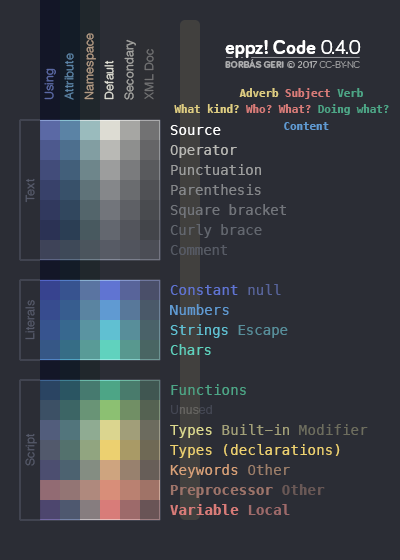
<style>
.page{position:relative;width:400px;height:560px;background:#2b2d35}
.page>*{position:absolute;margin:0}
.t1{font:11.9px "Helvetica";color:#b39c85;scale:1.05 1}
.t2{font:11.9px "Helvetica";color:#a6a6a3;scale:1.05 1}
.t3{font:20px "Bariol-Bold";letter-spacing:0.01em;color:#ffffff}
.t4{font:20px "Bariol-Regular";letter-spacing:0.01em;color:#ffffff}
.t5{font:11.9px "Helvetica";color:#5b83a5;scale:1.05 1}
.t6{font:11.9px "Helvetica";color:#727273;scale:1.05 1}
.t7{font:11.9px "Helvetica";color:#dddcd3;scale:1.05 1}
.t8{font:10px "Bariol-Bold";color:#abacae}
.t9{font:10px "Bariol-Regular";color:#abacae}
.t10{font:10px "Bariol-Light";color:#abacae}
.t11{font:11.9px "Helvetica";color:#5b69a5;scale:1.05 1}
.t12{font:10.8px "Menlo-Bold";color:#d87c79}
.t13{font:10.8px "Menlo-Bold";color:#decd82}
.t14{font:10.8px "Menlo-Bold";color:#4da586}
.t15{font:13.7px "Menlo-Regular";color:#ffffff}
.t16{font:10.8px "Menlo-Bold";color:#609ad2}
.t17{font:13.7px "Menlo-Regular";letter-spacing:-0.02em;color:#b9b9b5;scale:1.05 1}
.t18{font:13.7px "Menlo-Regular";letter-spacing:-0.02em;color:#9c9d9d;scale:1.05 1}
.t19{font:11.9px "Helvetica";color:#565a6a;scale:1.05 1}
.t20{font:13.7px "Menlo-Regular";letter-spacing:-0.02em;color:#85878a;scale:1.05 1}
.t21{font:13.7px "Menlo-Regular";letter-spacing:-0.02em;color:#72757b;scale:1.05 1}
.t22{font:13.7px "Menlo-Regular";letter-spacing:-0.02em;color:#63676f;scale:1.05 1}
.t23{font:13.7px "Menlo-Regular";letter-spacing:-0.02em;color:#575b65;scale:1.04 1}
.t24{font:13.7px "Menlo-Regular";color:#6074d2;scale:1.04 1}
.t25{font:13.7px "Menlo-Regular";color:#58649a;scale:1.04 1}
.t26{font:11.9px "Helvetica";color:#565a6a;scale:1.04 1}
.t27{font:13.7px "Menlo-Regular";color:#609ad2;scale:1.04 1}
.t28{font:13.7px "Menlo-Regular";letter-spacing:-0.02em;color:#60c0d2;scale:1.06 1}
.t29{font:13.7px "Menlo-Regular";letter-spacing:-0.02em;color:#588e9a;scale:1.06 1}
.t30{font:13.7px "Menlo-Regular";letter-spacing:-0.02em;color:#60d2be;scale:1.05 1}
.t31{font:13.7px "Menlo-Regular";color:#4da586;scale:1.04 1}
.t32{font:12px "Helvetica"}
.t33{font:13.7px "Menlo-Regular";color:#a2a079;scale:1.04 1}
.t34{font:13.7px "Menlo-Regular";color:#dcd98f;scale:1.04 1}
.t35{font:13.7px "Menlo-Regular";color:#6d6d5e;scale:1.04 1}
.t36{font:13.7px "Menlo-Regular";color:#ecd070;scale:1.04 1}
.t37{font:13.7px "Menlo-Regular";color:#d8a179;scale:1.04 1}
.t38{font:13.7px "Menlo-Regular";color:#9d7f6a;scale:1.04 1}
.t39{font:13.7px "Menlo-Bold";color:#9d746a;scale:1.04 1}
.t40{font:13.7px "Menlo-Bold";color:#695856;scale:1.04 1}
.t41{font:13.7px "Menlo-Bold";color:#d87c79;scale:1.04 1}
.t42{font:13.7px "Menlo-Bold";color:#9d6a6a;scale:1.04 1}
</style>
<div class="page">
<p class="t1" style="left:84px;top:33px;width:12px;height:67px;rotate:-90deg">Namespace</p>
<p class="t2" style="left:124px;top:39px;width:12px;height:61px;rotate:-90deg">Secondary</p>
<p class="t3" style="left:225px;top:40px;width:136px;height:18px">eppz! Code<span class="t4"> 0.4.0</span></p>
<p class="t5" style="left:64px;top:53px;width:10px;height:47px;rotate:-90deg">Attribute</p>
<p class="t6" style="left:144px;top:49px;width:10px;height:51px;rotate:-90deg">XML Doc</p>
<p class="t7" style="left:104px;top:60px;width:10px;height:40px;rotate:-90deg">Default</p>
<p class="t8" style="left:225px;top:59px;width:135px;height:9px">BORBÁS GERI<span class="t9"> © 2017 </span><span class="t10">CC-BY-NC</span></p>
<p class="t11" style="left:44px;top:68px;width:12px;height:32px;rotate:-90deg">Using</p>
<p class="t12" style="left:239px;top:88px;width:124px;height:11px"><span class="t13">Adverb </span>Subject <span class="t14">Verb</span></p>
<p class="t14" style="left:174px;top:104px;width:215px;height:11px"><span class="t13">What kind? </span><span class="t12">Who? What? </span>Doing what?</p>
<p class="t15" style="left:170px;top:125px;width:51px;height:10px">Source</p>
<p class="t16" style="left:284px;top:122px;width:45px;height:8px">Content</p>
<p class="t17" style="left:170px;top:145px;width:67px;height:13px">Operator</p>
<p class="t18" style="left:171px;top:164px;width:90px;height:11px">Punctuation</p>
<p class="t19" style="left:25px;top:178px;width:10px;height:25px;rotate:-90deg">Text</p>
<p class="t20" style="left:171px;top:184px;width:90px;height:11px">Parenthesis</p>
<p class="t21" style="left:170px;top:204px;width:116px;height:14px">Square bracket</p>
<p class="t22" style="left:170px;top:224px;width:92px;height:14px">Curly brace</p>
<p class="t23" style="left:170px;top:245px;width:57px;height:10px">Comment</p>
<p class="t24" style="left:170px;top:284px;width:111px;height:11px">Constant <span class="t25">null</span></p>
<p class="t26" style="left:25px;top:300px;width:10px;height:40px;rotate:-90deg">Literals</p>
<p class="t27" style="left:170px;top:304px;width:59px;height:11px">Numbers</p>
<p class="t28" style="left:170px;top:324px;width:118px;height:14px">Strings <span class="t29">Escape</span></p>
<p class="t30" style="left:170px;top:344px;width:41px;height:11px">Chars</p>
<p class="t31" style="left:171px;top:384px;width:75px;height:11px">Functions</p>
<p class="t32" style="left:171px;top:405px;width:41px;height:9px">Unused</p>
<p class="t33" style="left:170px;top:424px;width:198px;height:14px"><span class="t34">Types </span>Built-in <span class="t35">Modifier</span></p>
<p class="t19" style="left:25px;top:433px;width:12px;height:33px;rotate:-90deg">Script</p>
<p class="t36" style="left:170px;top:444px;width:170px;height:14px">Types (declarations)</p>
<p class="t37" style="left:170px;top:464px;width:120px;height:14px">Keywords <span class="t38">Other</span></p>
<p class="t39" style="left:170px;top:484px;width:155px;height:14px">Preprocessor <span class="t40">Other</span></p>
<p class="t41" style="left:170px;top:504px;width:120px;height:11px">Variable <span class="t42">Local</span></p>
</div>
